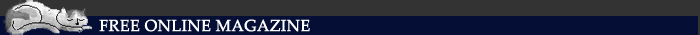
<style>
.page{position:relative;width:700px;height:35px;background:#050e35}
.page>*{position:absolute;margin:0}
.t1{font:16px "PalatinoLinotype-Roman";color:#ffffff;text-transform:uppercase;font-weight:bold}
</style>
<div class="page">
<p class="t1" style="left:99px;top:19px;width:211px;height:13px">free online magazine</p>
</div>
